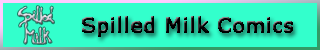
<style>
.page{position:relative;width:320px;height:50px;background:#33ffcc}
.page>*{position:absolute;margin:0}
.t1{font:20px "Verdana";color:#000000;font-weight:bold}
</style>
<div class="page">
<p class="t1" style="left:82px;top:16px;width:211px;height:21px">Spilled Milk Comics</p>
</div>
